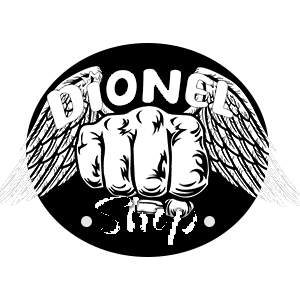
<style>
.page{position:relative;width:300px;height:300px;background:#ffffff}
.page>*{position:absolute;margin:0}
.t1{font:49.2px "Durian-Days";color:#ffffff;scale:0.91 1}
</style>
<div class="page">
<p class="t1" style="left:46px;top:67px;width:188px;height:64px;rotate:8deg">dionel</p>
</div>
